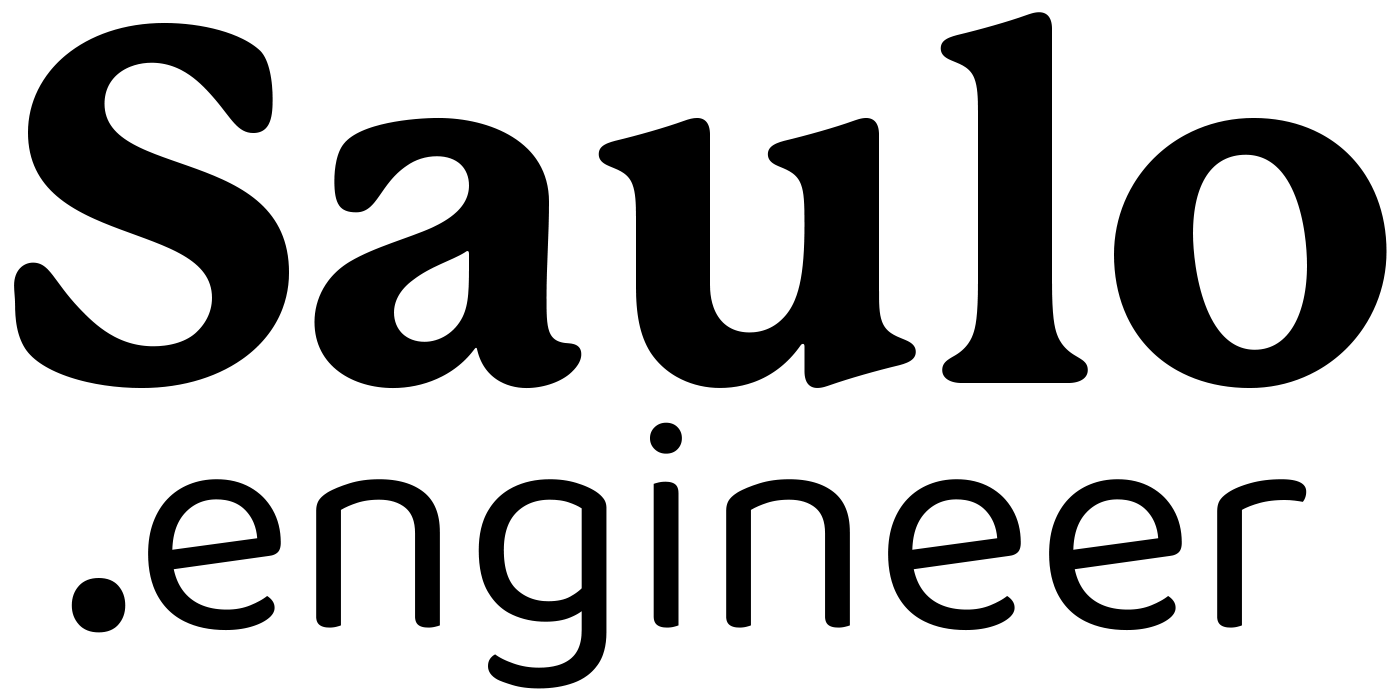
<style>
.page{position:relative;width:1400px;height:700px;background:#ffffff}
.page>*{position:absolute;margin:0}
.t1{font:496.3px "P22MackinacProExtraBold";color:#000000}
.t2{font:308.9px "BalooBhaijaan2-Regular";color:#000000}
.t3{font:489.5px "BalooBhaijaan2-Regular";color:#000000}
</style>
<div class="page">
<p class="t1" style="left:14px;top:12px;width:1373px;height:377px">Saulo</p>
<p class="t2" style="left:71px;top:422px;width:1236px;height:267px"><span class="t3">.</span>engineer</p>
</div>
